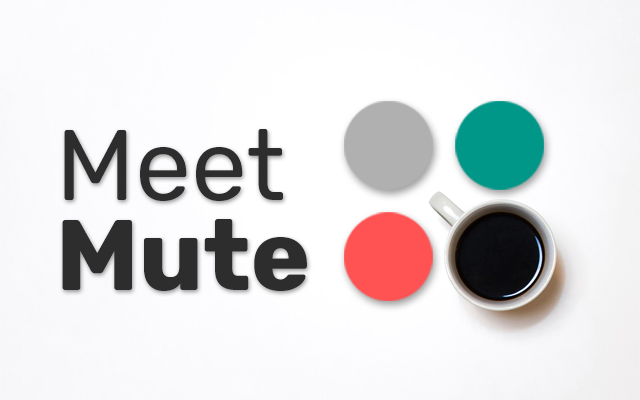
<style>
.page{position:relative;width:640px;height:400px}
.page>*{position:absolute;margin:0}
.t1{font:100px/90px "Rubik-Regular";color:#2d2d2d}
.t2{font:100px/90px "Rubik-Bold";color:#2d2d2d}
</style>
<div class="page">
<p class="t1" style="left:62px;top:129px;width:245px;height:162px">Meet<br><span class="t2">Mute</span></p>
</div>
